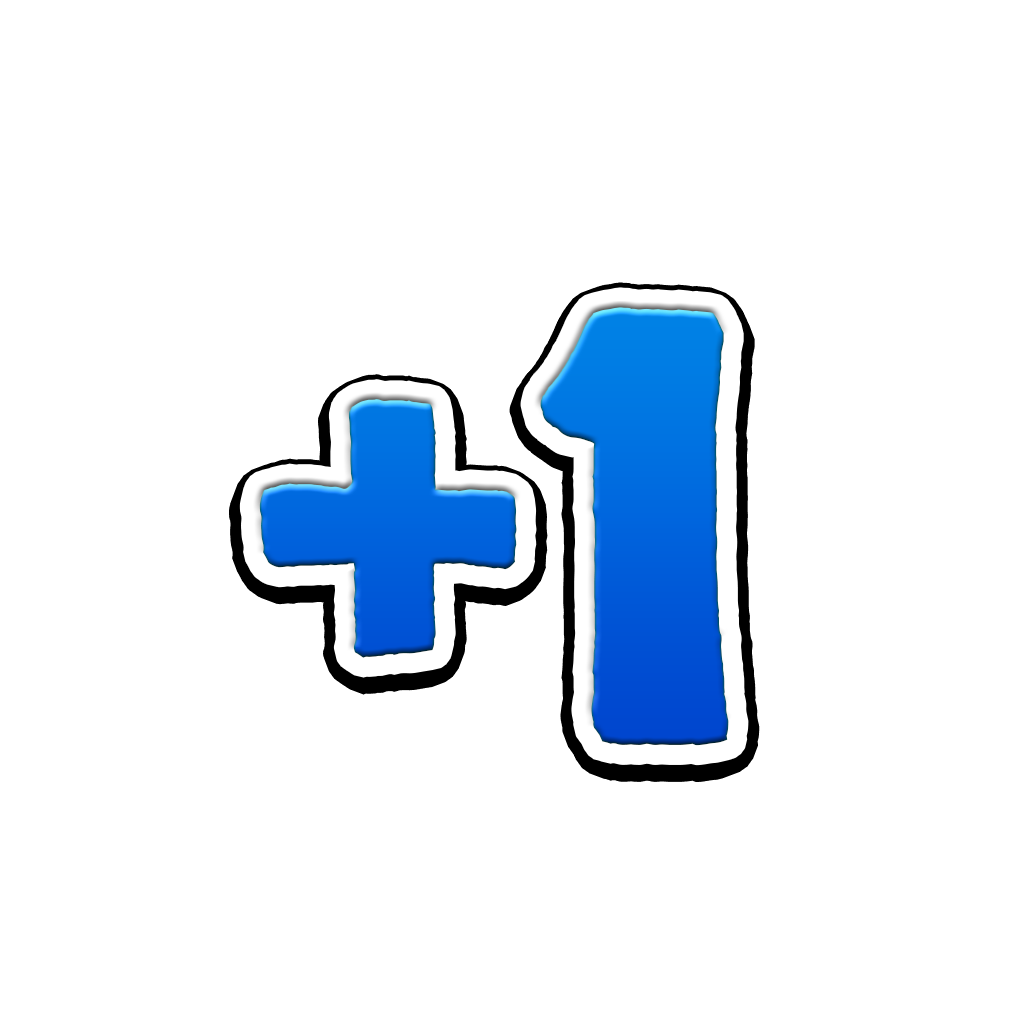
<style>
.page{position:relative;width:1024px;height:1024px;background:#ffffff}
.page>*{position:absolute;margin:0}
.t1{font:600px "Skranji-Bold";color:#0064dd}
</style>
<div class="page">
<p class="t1" style="left:259px;top:307px;width:470px;height:439px">+1</p>
</div>
